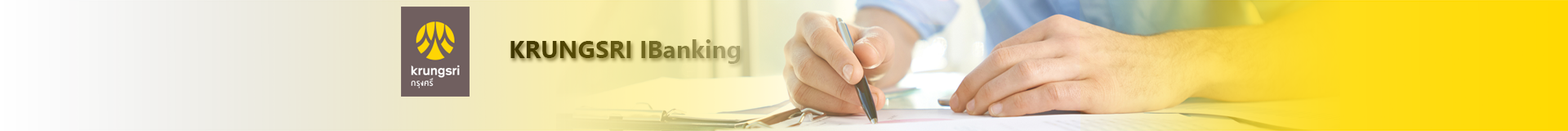
<style>
.page{position:relative;width:1568px;height:131px}
.page>*{position:absolute;margin:0}
.t1{font:24.5px "NirmalaUI-Bold"}
</style>
<div class="page">
<p class="t1" style="left:510px;top:39px;width:231px;height:25px">KRUNGSRI IBanking</p>
</div>
